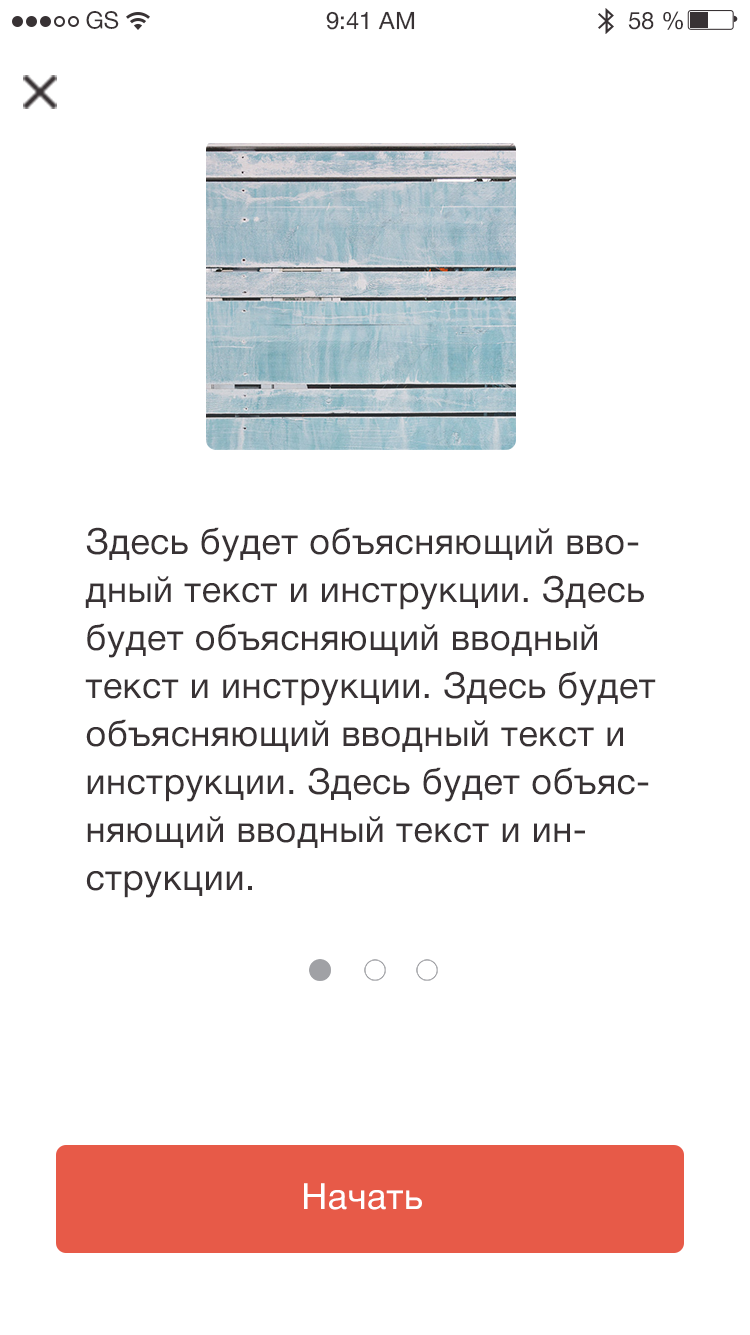
<style>
.page{position:relative;width:750px;height:1335px;background:#ffffff}
.page>*{position:absolute;margin:0}
.t1{font:24px "HelveticaNeueCyr-Roman";color:#383234}
.t2{font:36px/48px "HelveticaNeueCyr-Roman";letter-spacing:0.016em;color:#383234}
.t3{font:36px "HelveticaNeueCyr-Roman";letter-spacing:0.016em;color:#ffffff}
</style>
<div class="page">
<p class="t1" style="left:86px;top:11px;width:33px;height:18px">GS</p>
<p class="t1" style="left:326px;top:11px;width:89px;height:19px">9:41 AM</p>
<p class="t1" style="left:628px;top:11px;width:55px;height:19px">58 %</p>
<p class="t2" style="left:85px;top:527px;width:571px;height:371px">Здесь будет объясняющий вводный текст и инструкции. Здесь будет объясняющий вводный текст и инструкции. Здесь будет объясняющий вводный текст и инструкции. Здесь будет объясняющий вводный текст и инструкции.</p>
<p class="t3" style="left:304px;top:1183px;width:118px;height:27px">Начать</p>
</div>
